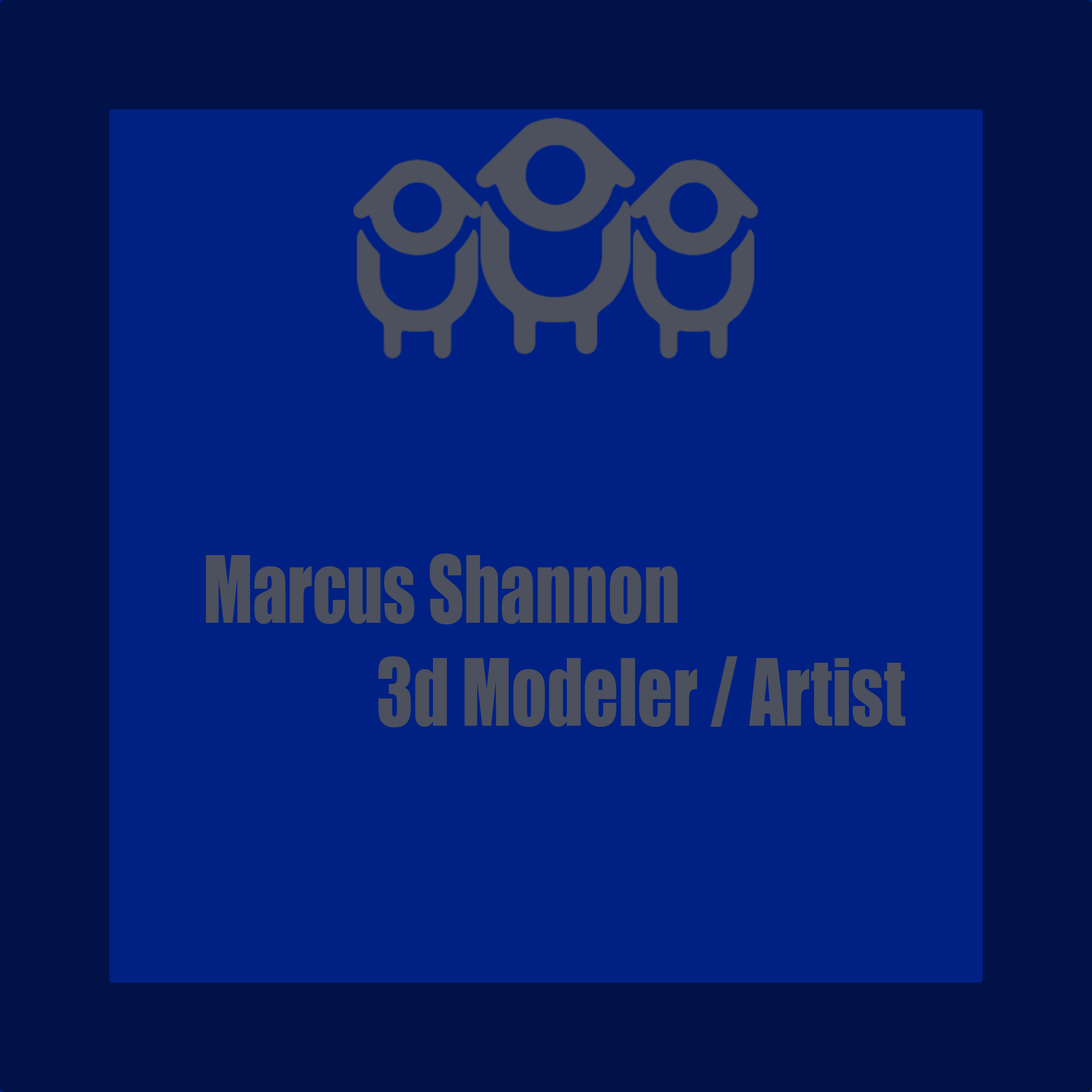
<style>
.page{position:relative;width:1092px;height:1092px;background:#002183}
.page>*{position:absolute;margin:0}
.t1{font:85.8px "Impact";color:#4d505d;scale:0.81 1}
</style>
<div class="page">
<p class="t1" style="left:206px;top:553px;width:699px;height:174px">Marcus Shannon<br>     3d Modeler / Artist</p>
</div>
